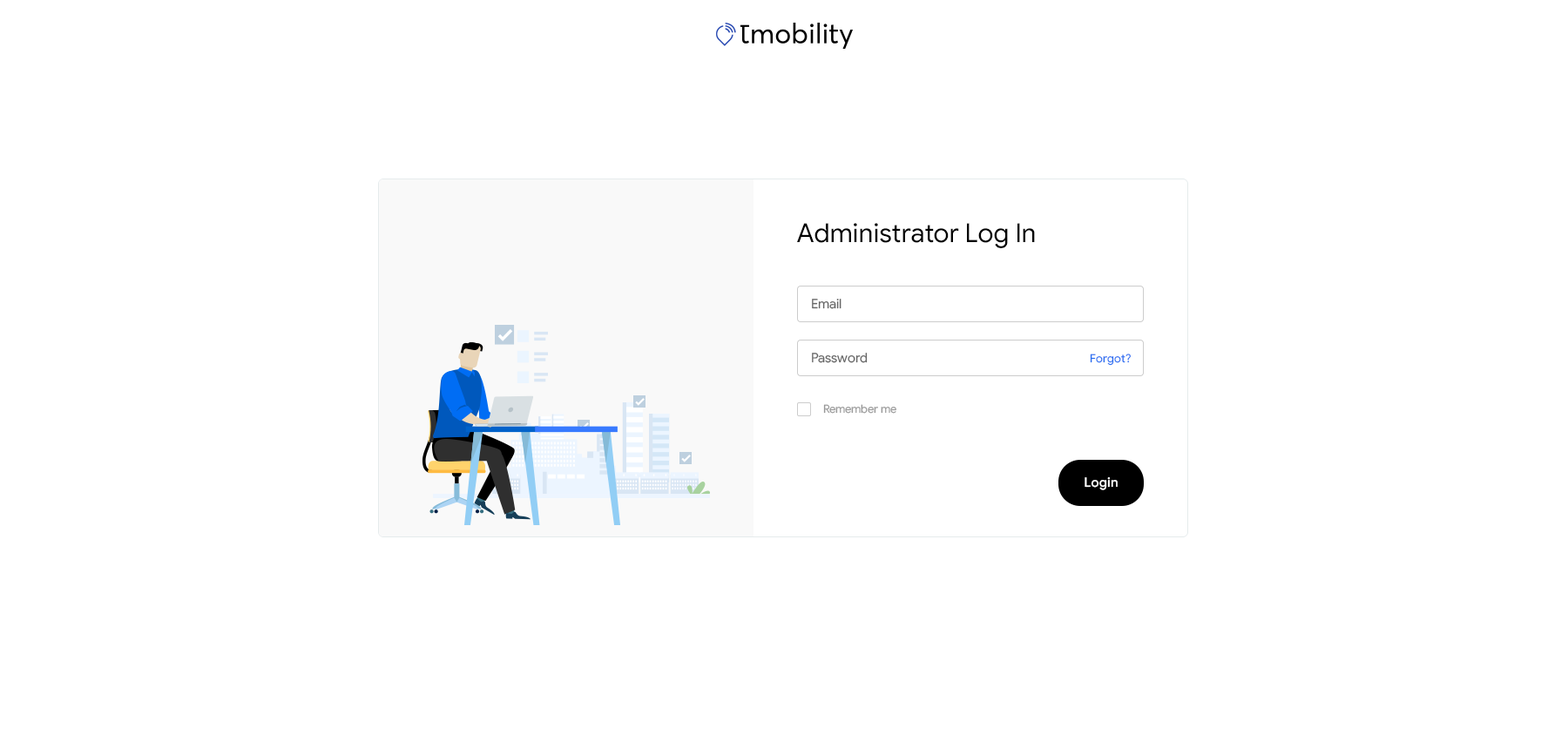
<style>
.page{position:relative;width:1568px;height:735px;background:#ffffff}
.page>*{position:absolute;margin:0}
.t1{font:26.1px "GoogleSans-Regular";color:#000000}
.t2{font:13.1px "GoogleSans-Regular";color:#666666}
.t3{font:11.3px "GoogleSans-Regular";color:#276ef1}
.t4{font:11.3px "GoogleSans-Regular";color:#999999}
.t5{font:13.1px "GoogleSans-Medium";letter-spacing:0.01em;color:#ffffff}
</style>
<div class="page">
<p class="t1" style="left:797px;top:223px;width:238px;height:25px">Administrator Log In</p>
<p class="t2" style="left:812px;top:299px;width:29px;height:10px">Email</p>
<p class="t2" style="left:812px;top:353px;width:56px;height:10px">Password</p>
<p class="t3" style="left:1090px;top:354px;width:41px;height:12px">Forgot?</p>
<p class="t4" style="left:823px;top:404px;width:73px;height:10px">Remember me</p>
<p class="t5" style="left:1085px;top:477px;width:33px;height:13px">Login</p>
</div>
